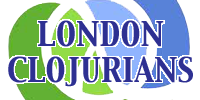
<style>
.page{position:relative;width:200px;height:100px;background:#ffffff}
.page>*{position:absolute;margin:0}
.t1{font:30px "CapitalsRegular";color:#2e3092}
</style>
<div class="page">
<p class="t1" style="left:8px;top:20px;width:185px;height:67px;text-align:center">LONDON<br>CLOJURIANS</p>
</div>
